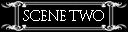
<style>
.page{position:relative;width:128px;height:32px;background:#000000}
.page>*{position:absolute;margin:0}
.t1{font:14px "TrajanPro-Regular";letter-spacing:-0.1em;color:#ffffff}
</style>
<div class="page">
<p class="t1" style="left:23px;top:10px;width:81px;height:11px">SCENE TWO</p>
</div>
